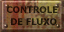
<style>
.page{position:relative;width:64px;height:32px}
.page>*{position:absolute;margin:0}
.t1{font:9.3px/12px "Tahoma-Bold";color:#261408;text-transform:uppercase}
</style>
<div class="page">
<p class="t1" style="left:6px;top:6px;width:52px;height:19px;text-align:center">controle <br>de fluxo</p>
</div>
